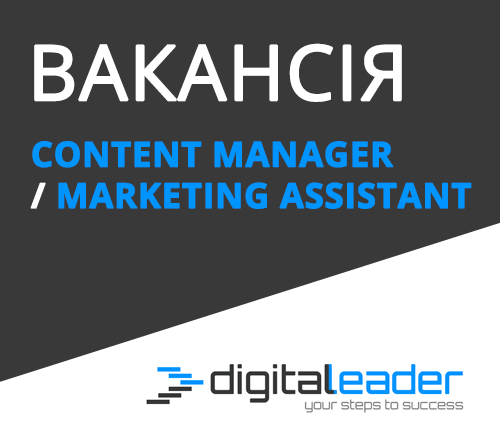
<style>
.page{position:relative;width:500px;height:442px;background:#393939}
.page>*{position:absolute;margin:0}
.t1{font:76px "OpenSans";color:#ffffff;text-transform:uppercase;font-weight:bold}
.t2{font:34.5px "OpenSans-Bold";color:#0094ff;text-transform:uppercase;font-weight:bold}
.t3{font:34.5px "OpenSans-Bold";color:#ffffff;text-transform:uppercase;font-weight:bold}
</style>
<div class="page">
<p class="t1" style="left:34px;top:43px;width:368px;height:59px">Вакансія</p>
<p class="t2" style="left:30px;top:141px;width:442px;height:68px">Content Manager <br><span class="t3">/</span> Marketing assistant</p>
</div>
